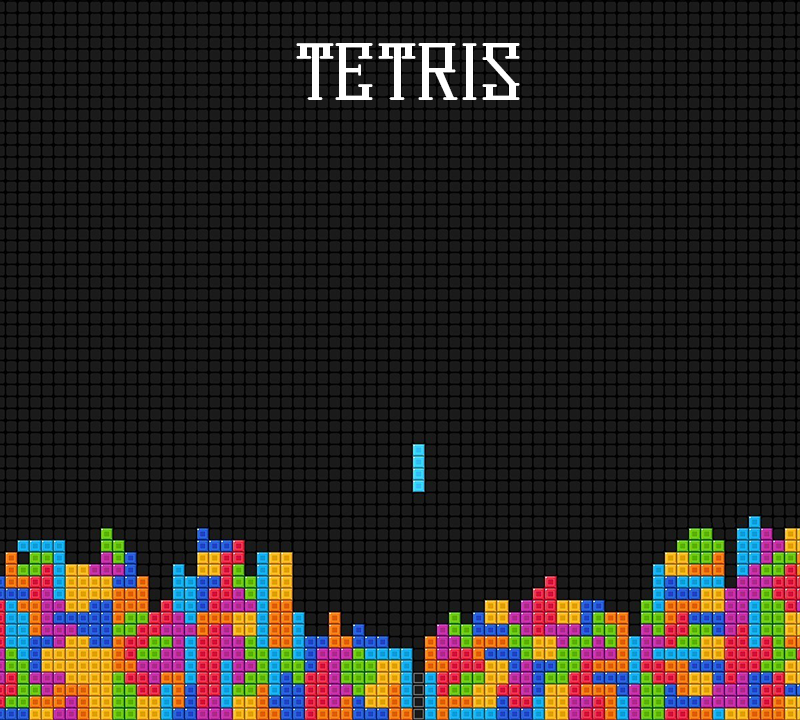
<style>
.page{position:relative;width:800px;height:720px;background:#1a1a1a}
.page>*{position:absolute;margin:0}
.t1{font:71px "Springmarch-Roman";color:#ffffff}
</style>
<div class="page">
<p class="t1" style="left:296px;top:43px;width:224px;height:57px">TETRIS</p>
</div>
